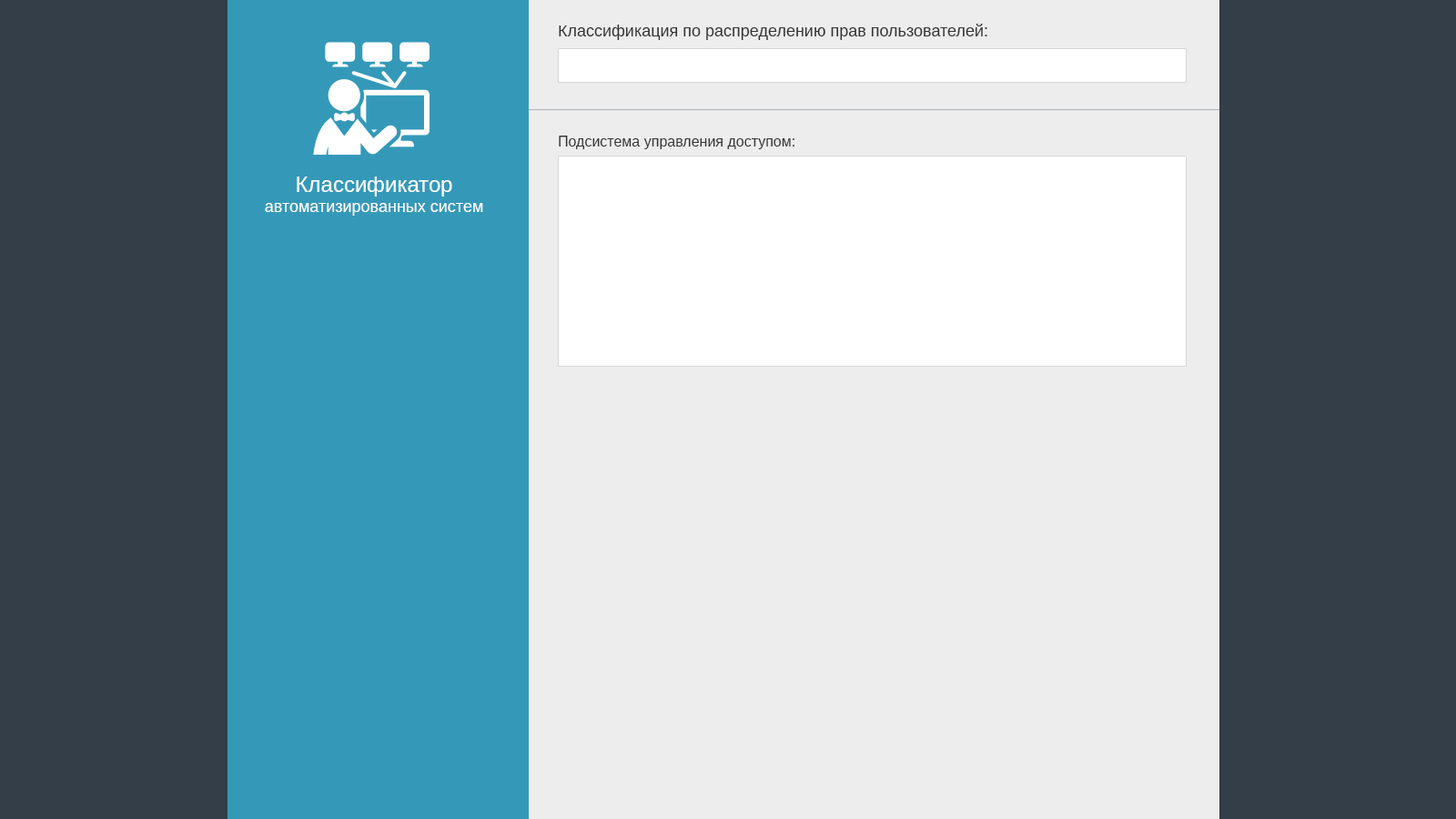
<style>
.page{position:relative;width:1456px;height:819px;background:#ededed}
.page>*{position:absolute;margin:0}
.t1{font:16.4px "Arimo";color:#333333}
.t2{font:14.6px "Arimo";color:#333333}
.t3{font:16.4px "Arimo";color:#ffffff}
.t4{font:21.8px "Arimo";color:#ffffff}
</style>
<div class="page">
<p class="t1" style="left:559px;top:24px;width:428px;height:16px">Классификация по распределению прав пользователей:</p>
<p class="t2" style="left:559px;top:136px;width:235px;height:13px">Подсистема управления доступом:</p>
<p class="t3" style="left:265px;top:177px;width:218px;height:39px;text-align:center"><span class="t4">Классификатор<br></span>автоматизированных систем</p>
</div>
